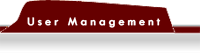
<style>
.page{position:relative;width:200px;height:53px;background:#660000}
.page>*{position:absolute;margin:0}
.t1{font:12px "TwCenMT-Regular";letter-spacing:0.25em;color:#ffffff;font-weight:bold}
</style>
<div class="page">
<p class="t1" style="left:27px;top:17px;width:134px;height:11px">User Management</p>
</div>
